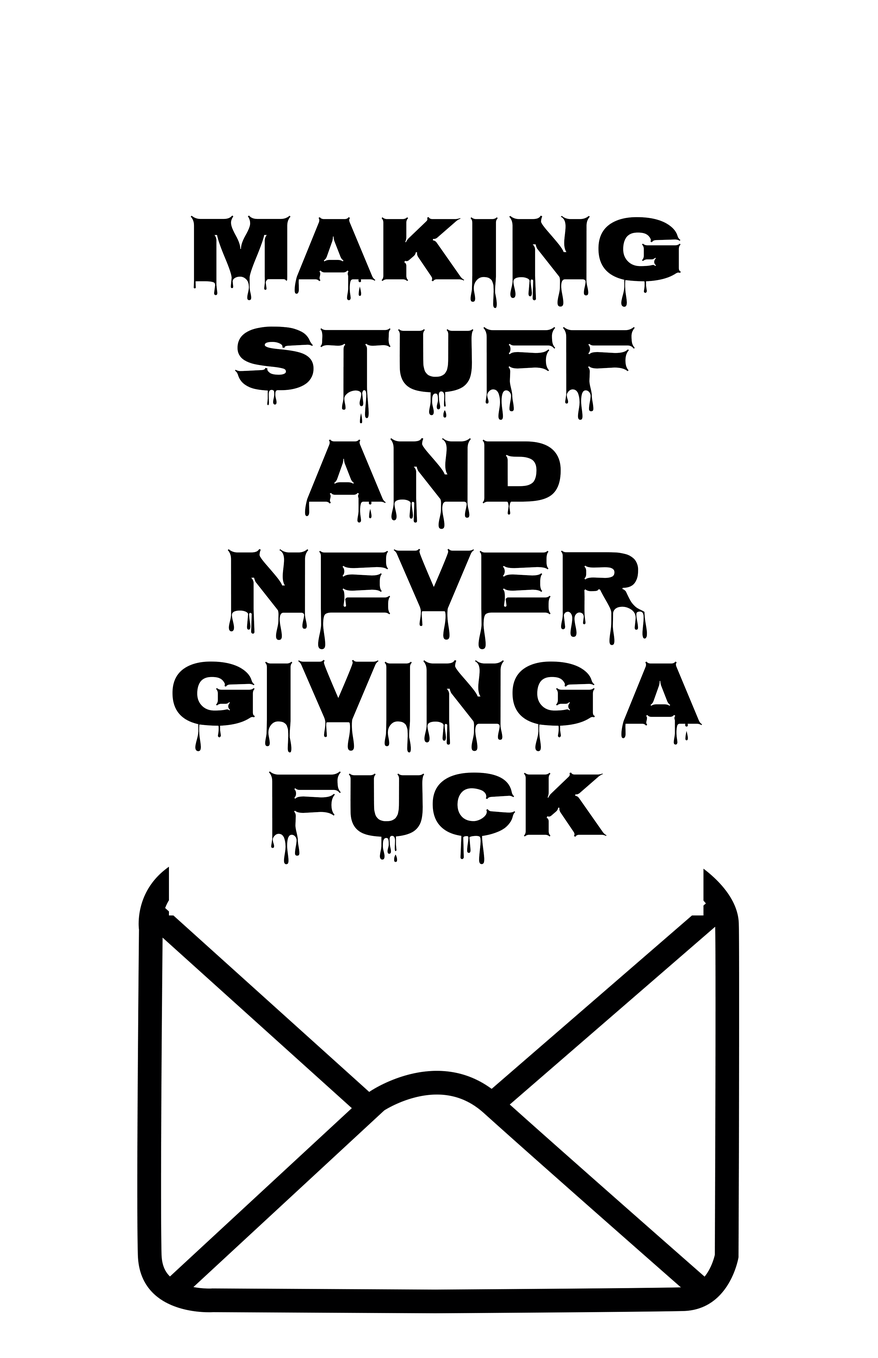
<style>
.page{position:relative;width:878px;height:1358px;background:#ffffff}
.page>*{position:absolute;margin:0}
.t1{font:92.5px "Nosifer-Regular";color:#000000}
</style>
<div class="page">
<p class="t1" style="left:172px;top:215px;width:530px;height:649px;text-align:center">Making stuff <br>and Never giving a fuck</p>
</div>
